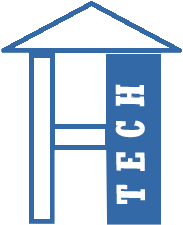
<style>
.page{position:relative;width:183px;height:225px;background:#ffffff}
.page>*{position:absolute;margin:0}
.t1{font:40px "Rockwell-CondensedBold";color:#ffffff;scale:0.96 1}
</style>
<div class="page">
<p class="t1" style="left:115px;top:84px;width:30px;height:120px;rotate:-90deg">T E C H</p>
</div>
